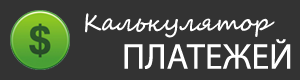
<style>
.page{position:relative;width:300px;height:80px;background:#333333}
.page>*{position:absolute;margin:0}
.t1{font:24px "SegoeScript";color:#ffffff}
.t2{font:36px "MyriadPro-Regular";color:#ffffff}
</style>
<div class="page">
<p class="t1" style="left:85px;top:13px;width:190px;height:25px">Калькулятор</p>
<p class="t2" style="left:124px;top:39px;width:167px;height:30px">ПЛАТЕЖЕЙ</p>
</div>
